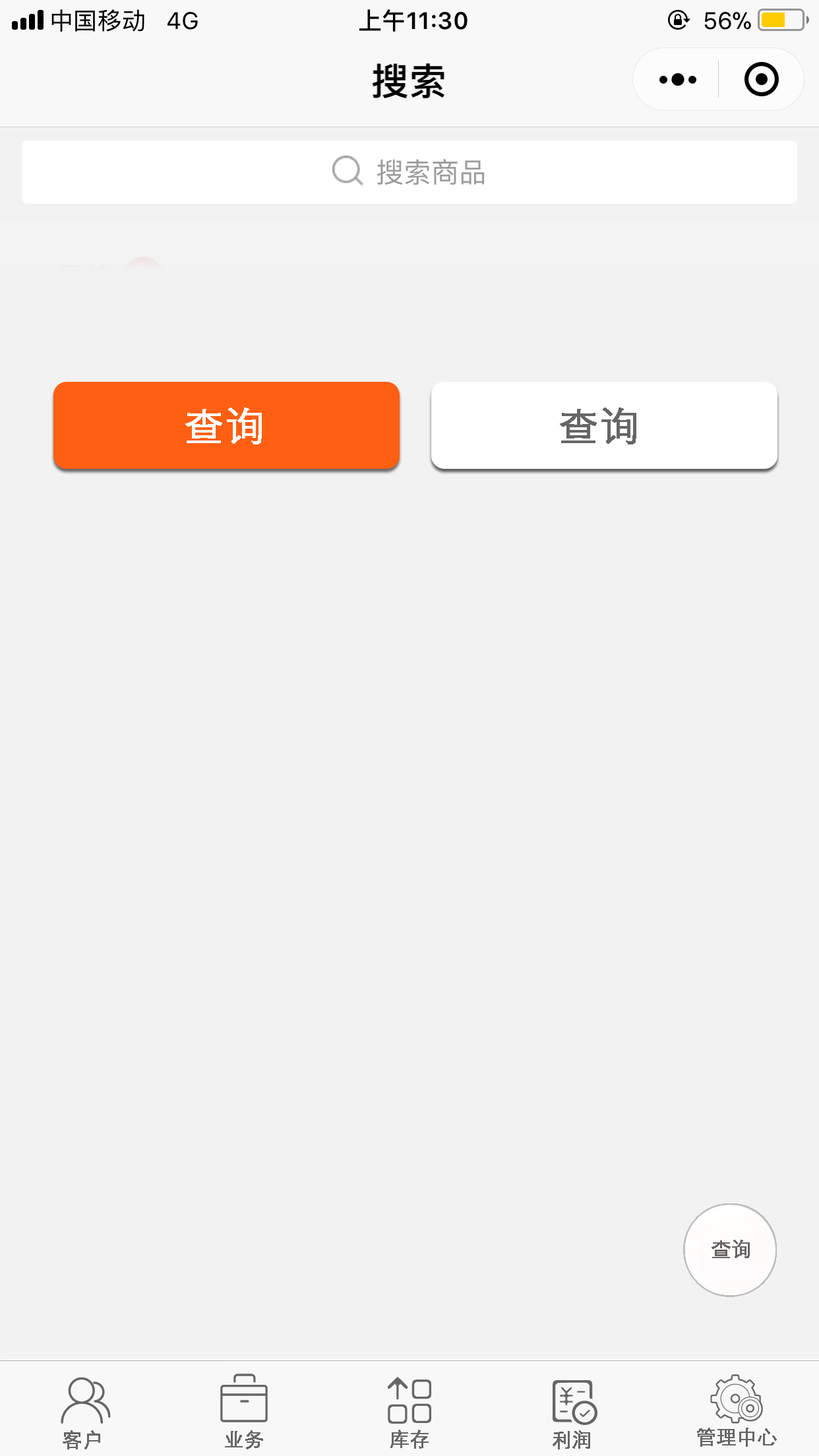
<style>
.page{position:relative;width:819px;height:1456px;background:#f2f2f2}
.page>*{position:absolute;margin:0}
.t1{font:39.6px "STXihei";color:#ffffff;font-weight:bold}
.t2{font:39.6px "STXihei";color:#666666;font-weight:bold}
.t3{font:19.8px "STXihei";color:#666463;font-weight:bold}
.t4{font:19.8px "STXihei";color:#666666;font-weight:bold}
</style>
<div class="page">
<p class="t1" style="left:185px;top:408px;width:77px;height:36px">查询</p>
<p class="t2" style="left:560px;top:408px;width:76px;height:36px">查询</p>
<p class="t3" style="left:712px;top:1240px;width:38px;height:18px">查询</p>
<p class="t4" style="left:63px;top:1430px;width:37px;height:19px">客户</p>
<p class="t4" style="left:225px;top:1430px;width:38px;height:19px">业务</p>
<p class="t4" style="left:390px;top:1430px;width:39px;height:19px">库存</p>
<p class="t4" style="left:553px;top:1430px;width:37px;height:19px">利润</p>
<p class="t4" style="left:697px;top:1428px;width:80px;height:19px">管理中心</p>
</div>
